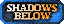
<style>
.page{position:relative;width:64px;height:24px}
.page>*{position:absolute;margin:0}
.t1{font:10px "Georgia-Bold";letter-spacing:-0.04em;text-transform:uppercase}
.t2{font:10px "Georgia-Bold";letter-spacing:-0.16em;text-transform:uppercase}
.t3{font:10px "Georgia-Bold";letter-spacing:-0.12em;text-transform:uppercase}
.t4{font:10px "Georgia-Bold";letter-spacing:-0.08em;text-transform:uppercase}
.t5{font:10px "Georgia-Bold";letter-spacing:-0.14em;text-transform:uppercase}
.t6{font:10px "Georgia-Bold";letter-spacing:-0.06em;text-transform:uppercase}
.t7{font:10px "Georgia-Bold";letter-spacing:-0.1em;text-transform:uppercase}
</style>
<div class="page">
<p class="t1" style="left:7px;top:4px;width:50px;height:7px"><span class="t2">S</span><span class="t3">h</span><span class="t4">a</span><span class="t5">d</span><span class="t2">o</span>ws</p>
<p class="t6" style="left:14px;top:12px;width:37px;height:7px">B<span class="t3">e</span><span class="t4">l</span><span class="t3">o</span><span class="t7">w</span></p>
</div>
